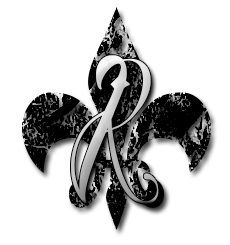
<style>
.page{position:relative;width:230px;height:245px;background:#ffffff}
.page>*{position:absolute;margin:0}
.t1{font:172.8px "BrotherTattoo";letter-spacing:-0.05em;text-transform:uppercase;scale:0.83 1}
</style>
<div class="page">
<p class="t1" style="left:71px;top:55px;width:88px;height:149px">R</p>
</div>
